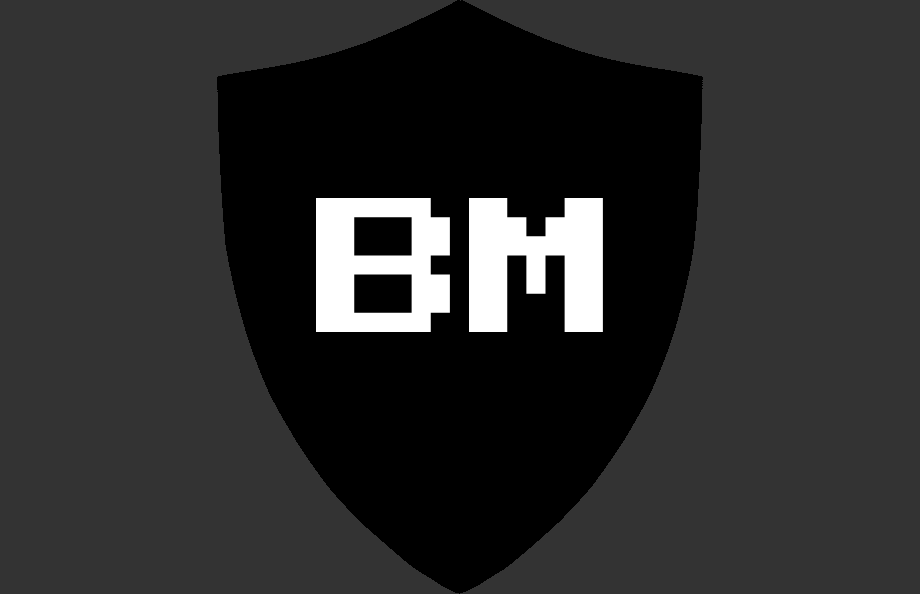
<style>
.page{position:relative;width:920px;height:594px;background:#333333}
.page>*{position:absolute;margin:0}
.t1{font:153px "PressStart2P-Regular";color:#ffffff}
</style>
<div class="page">
<p class="t1" style="left:316px;top:198px;width:287px;height:134px">BM</p>
</div>
